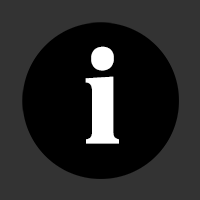
<style>
.page{position:relative;width:200px;height:200px;background:#333333}
.page>*{position:absolute;margin:0}
.t1{font:119.9px "BrianJames-CondensedBold";color:#ffffff}
</style>
<div class="page">
<p class="t1" style="left:85px;top:46px;width:34px;height:98px">i</p>
</div>
